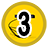
<style>
.page{position:relative;width:48px;height:48px;background:#ffffff}
.page>*{position:absolute;margin:0}
.t1{font:32.6px "ArialRoundedMTBold";letter-spacing:0.12em;color:#000000;font-weight:bold;scale:0.67 1}
</style>
<div class="page">
<p class="t1" style="left:18px;top:11px;width:12px;height:26px">3</p>
</div>
